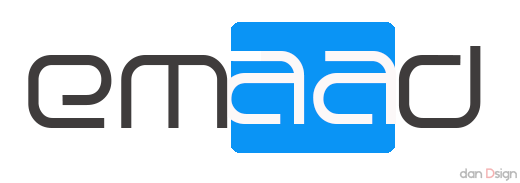
<style>
.page{position:relative;width:520px;height:183px;background:#ffffff}
.page>*{position:absolute;margin:0}
.t1{font:125px "Birdman";letter-spacing:0.02em;color:#3f3c3c}
.t2{font:125px "Birdman";color:#3f3c3c}
.t3{font:125px "Birdman";color:#fcf8f8}
.t4{font:14px "BlissfulThinking";color:#b8b8b8}
</style>
<div class="page">
<p class="t1" style="left:28px;top:46px;width:453px;height:82px"><span class="t2">e</span>m   D</p>
<p class="t3" style="left:221px;top:51px;width:176px;height:73px">aa</p>
<p class="t4" style="left:459px;top:168px;width:58px;height:13px">dan Dsign</p>
</div>
